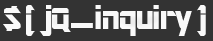
<style>
.page{position:relative;width:213px;height:41px;background:#333333}
.page>*{position:absolute;margin:0}
.t1{font:33.5px "ARDESTINE";letter-spacing:-0.02em;color:#efefef}
.t2{font:33.5px "ARDESTINE";letter-spacing:-0.02em;color:#ffffff}
</style>
<div class="page">
<p class="t1" style="left:3px;top:5px;width:203px;height:31px"><span class="t2">$(</span>jQ_inquiry<span class="t2">)</span></p>
</div>
